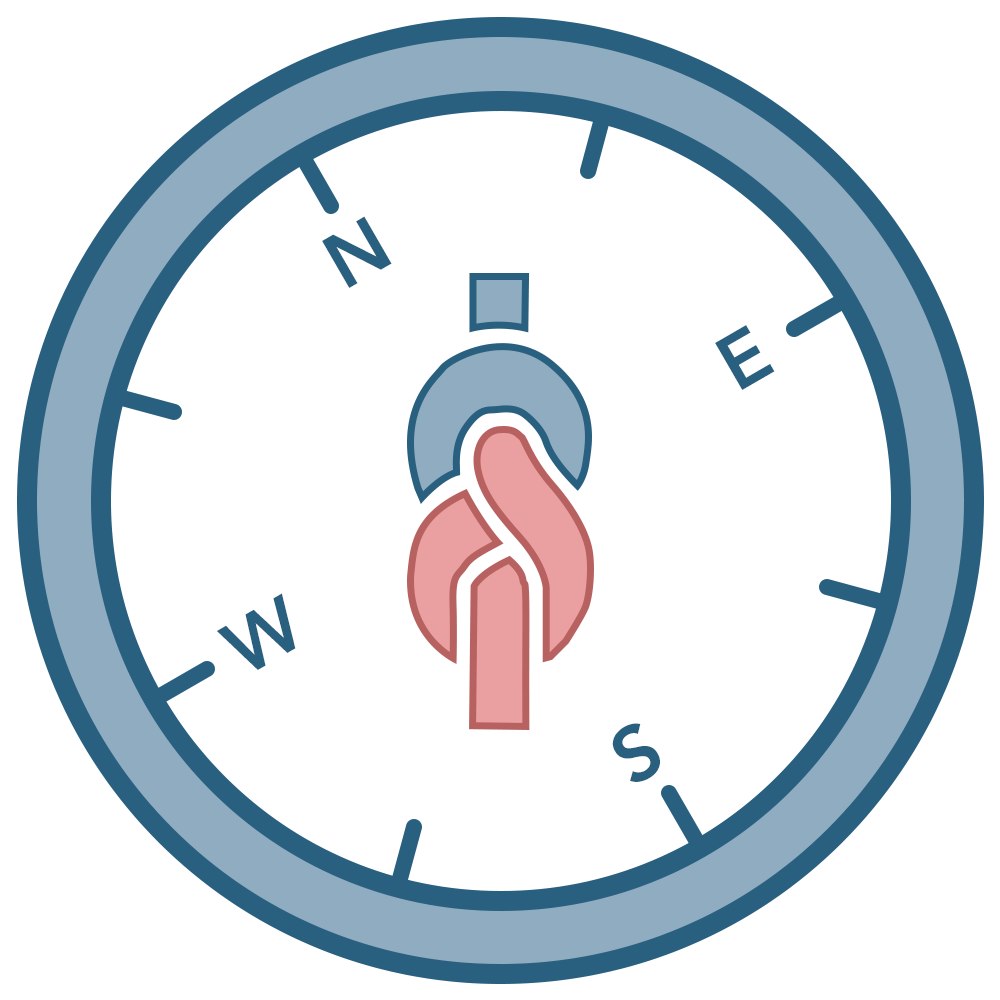
<style>
.page{position:relative;width:1000px;height:1000px;background:#ffffff}
.page>*{position:absolute;margin:0}
.t1{font:76.5px "Avenir-Heavy";color:#295f7f}
</style>
<div class="page">
<p class="t1" style="left:322px;top:216px;width:70px;height:72px;rotate:-30deg">N</p>
<p class="t1" style="left:715px;top:325px;width:60px;height:65px;rotate:-30deg">E</p>
<p class="t1" style="left:216px;top:593px;width:80px;height:77px;rotate:-30deg">W</p>
<p class="t1" style="left:612px;top:723px;width:48px;height:59px;rotate:-30deg">S</p>
</div>
